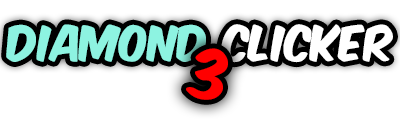
<style>
.page{position:relative;width:400px;height:125px;background:#ffffff}
.page>*{position:absolute;margin:0}
.t1{font:41.7px "KomikaAxis";color:#8df3e1}
.t2{font:41.7px "KomikaAxis";color:#ffffff}
.t3{font:58.3px "KomikaAxis";color:#ff0000}
</style>
<div class="page">
<p class="t1" style="left:6px;top:24px;width:387px;height:39px">DIAMOND<span class="t2"> CLICKER</span></p>
<p class="t3" style="left:186px;top:48px;width:42px;height:52px;rotate:5deg">3</p>
</div>
